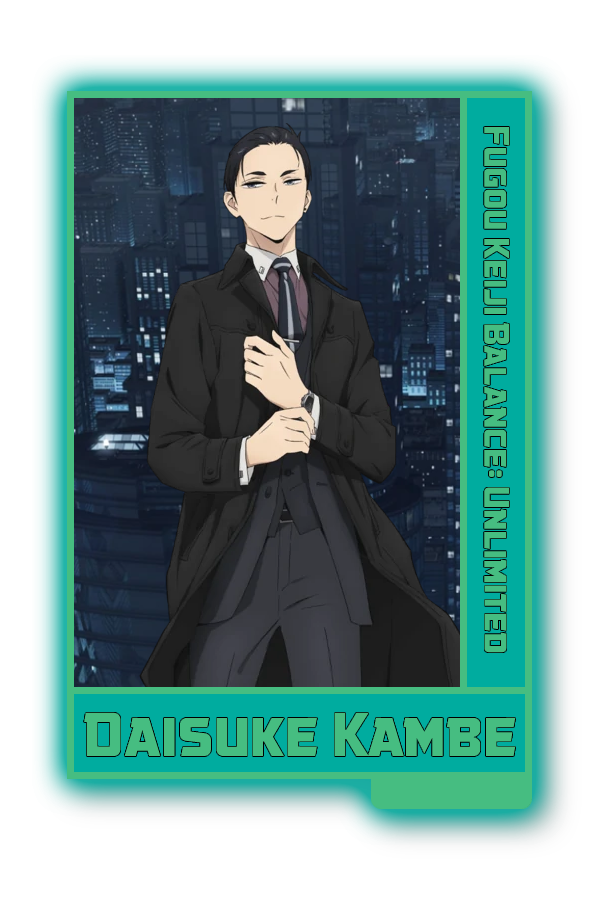
<style>
.page{position:relative;width:600px;height:900px;background:#ffffff}
.page>*{position:absolute;margin:0}
.t1{font:37.3px "GovernmentAgentBB";color:#46bd81}
.t2{font:64.5px "GovernmentAgentBB";color:#46bd81}
</style>
<div class="page">
<p class="t1" style="left:484px;top:127px;width:26px;height:526px;rotate:90deg">Fugou Keiji Balance: Unlimited</p>
<p class="t2" style="left:84px;top:712px;width:432px;height:44px">Daisuke Kambe</p>
</div>
